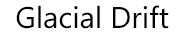
<style>
.page{position:relative;width:184px;height:36px;background:#ffffff}
.page>*{position:absolute;margin:0}
.t1{font:30px "NirmalaUI";color:#000000}
</style>
<div class="page">
<p class="t1" style="left:16px;top:5px;width:153px;height:24px">Glacial Drift</p>
</div>
